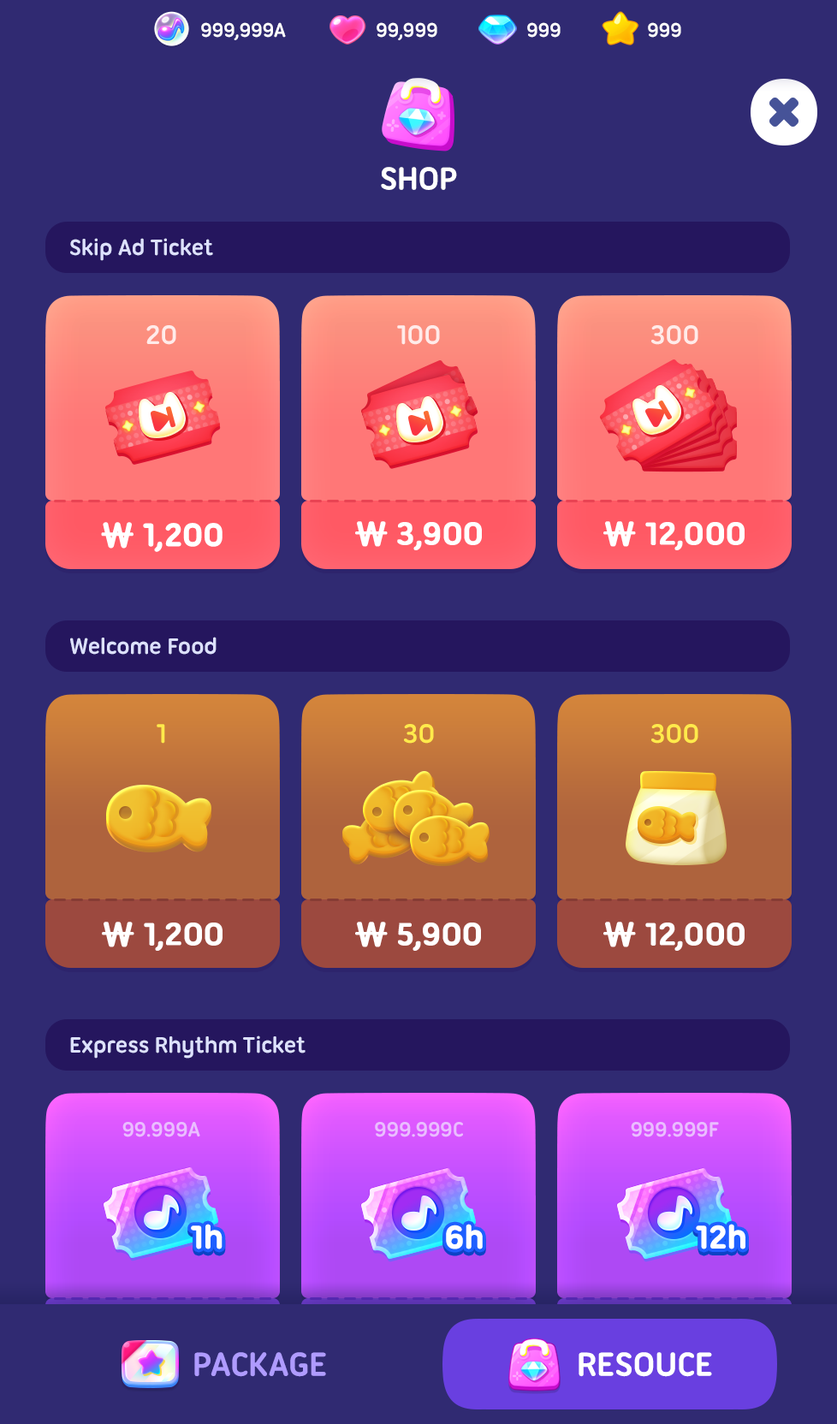
<style>
.page{position:relative;width:837px;height:1424px;background:#302a72}
.page>*{position:absolute;margin:0}
.t1{font:21.4px "UbuntuTitling-Bold";letter-spacing:-0.025em;color:#ffffff}
.t2{font:34.2px "UbuntuTitling-Bold";letter-spacing:-0.025em;color:#ffffff;text-transform:uppercase}
.t3{font:24px "UbuntuTitling-Bold";letter-spacing:-0.025em;color:#dde1ff}
.t4{font:29.1px "UbuntuTitling-Bold";letter-spacing:-0.025em;color:#ffebe9}
.t5{font:34.2px "UbuntuTitling-Bold";letter-spacing:-0.025em;color:#ffffff;text-transform:uppercase;font-weight:bold}
.t6{font:34.2px "NanumSquareRoundOTFEB";letter-spacing:-0.025em;color:#ffffff;text-transform:uppercase;font-weight:bold}
.t7{font:29.1px "UbuntuTitling-Bold";letter-spacing:-0.025em;color:#ffea4b}
.t8{font:22.3px "UbuntuTitling-Bold";letter-spacing:-0.025em;color:#eabdff}
.t9{font:34.2px "UbuntuTitling-Bold";letter-spacing:-0.025em;color:#ffffff;font-weight:bold}
.t10{font:36px "UbuntuTitling-Bold";letter-spacing:-0.025em;color:#af9bff;text-transform:uppercase}
.t11{font:36px "UbuntuTitling-Bold";letter-spacing:-0.025em;color:#ffffff;text-transform:uppercase}
</style>
<div class="page">
<p class="t1" style="left:201px;top:22px;width:85px;height:18px">999,999A</p>
<p class="t1" style="left:377px;top:22px;width:60px;height:18px">99,999</p>
<p class="t1" style="left:527px;top:22px;width:34px;height:16px">999</p>
<p class="t1" style="left:648px;top:22px;width:33px;height:16px">999</p>
<p class="t2" style="left:381px;top:167px;width:76px;height:23px">Shop</p>
<p class="t3" style="left:70px;top:238px;width:143px;height:23px">Skip Ad Ticket</p>
<p class="t4" style="left:146px;top:325px;width:30px;height:20px">20</p>
<p class="t4" style="left:397px;top:325px;width:43px;height:20px">100</p>
<p class="t4" style="left:651px;top:325px;width:47px;height:20px">300</p>
<p class="t5" style="left:355px;top:521px;width:127px;height:29px"><span class="t6">₩ </span>3,900</p>
<p class="t5" style="left:603px;top:521px;width:142px;height:29px"><span class="t6">₩ </span>12,000</p>
<p class="t5" style="left:101px;top:522px;width:122px;height:30px"><span class="t6">₩ </span>1,200</p>
<p class="t3" style="left:70px;top:637px;width:147px;height:18px">Welcome Food</p>
<p class="t7" style="left:157px;top:724px;width:8px;height:20px">1</p>
<p class="t7" style="left:404px;top:724px;width:30px;height:20px">30</p>
<p class="t7" style="left:651px;top:724px;width:47px;height:20px">300</p>
<p class="t5" style="left:102px;top:922px;width:121px;height:29px"><span class="t6">₩ </span>1,200</p>
<p class="t5" style="left:355px;top:922px;width:126px;height:29px"><span class="t6">₩ </span>5,900</p>
<p class="t5" style="left:603px;top:922px;width:142px;height:29px"><span class="t6">₩ </span>12,000</p>
<p class="t3" style="left:70px;top:1036px;width:236px;height:23px">Express Rhythm Ticket</p>
<p class="t8" style="left:122px;top:1122px;width:78px;height:16px">99.999A</p>
<p class="t8" style="left:375px;top:1122px;width:88px;height:16px">999.999C</p>
<p class="t8" style="left:631px;top:1122px;width:88px;height:16px">999.999F</p>
<p class="t9" style="left:191px;top:1224px;width:32px;height:26px">1h</p>
<p class="t9" style="left:446px;top:1224px;width:37px;height:26px">6h</p>
<p class="t9" style="left:696px;top:1224px;width:50px;height:26px">12h</p>
<p class="t10" style="left:194px;top:1352px;width:132px;height:25px">Package</p>
<p class="t11" style="left:579px;top:1352px;width:133px;height:25px">Resouce</p>
</div>
